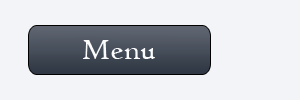
<style>
.page{position:relative;width:300px;height:100px;background:#f3f4f7}
.page>*{position:absolute;margin:0}
.t1{font:30px "HighTowerText-Reg";color:#fbfbfc}
</style>
<div class="page">
<p class="t1" style="left:83px;top:40px;width:72px;height:19px">Menu</p>
</div>
